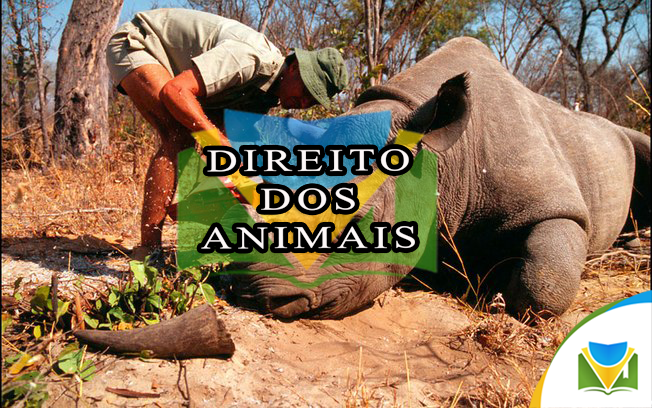
<style>
.page{position:relative;width:652px;height:408px}
.page>*{position:absolute;margin:0}
.t1{font:31.4px/19.3px "MyriadPro-Regular";letter-spacing:0.1em;color:#fdf8f8;text-transform:uppercase;font-weight:bold;font-style:italic;scale:1.35 1}
</style>
<div class="page">
<p class="t1" style="left:201px;top:149px;width:214px;height:100px;text-align:center">direito <br><br>dos <br><br>animais</p>
</div>
